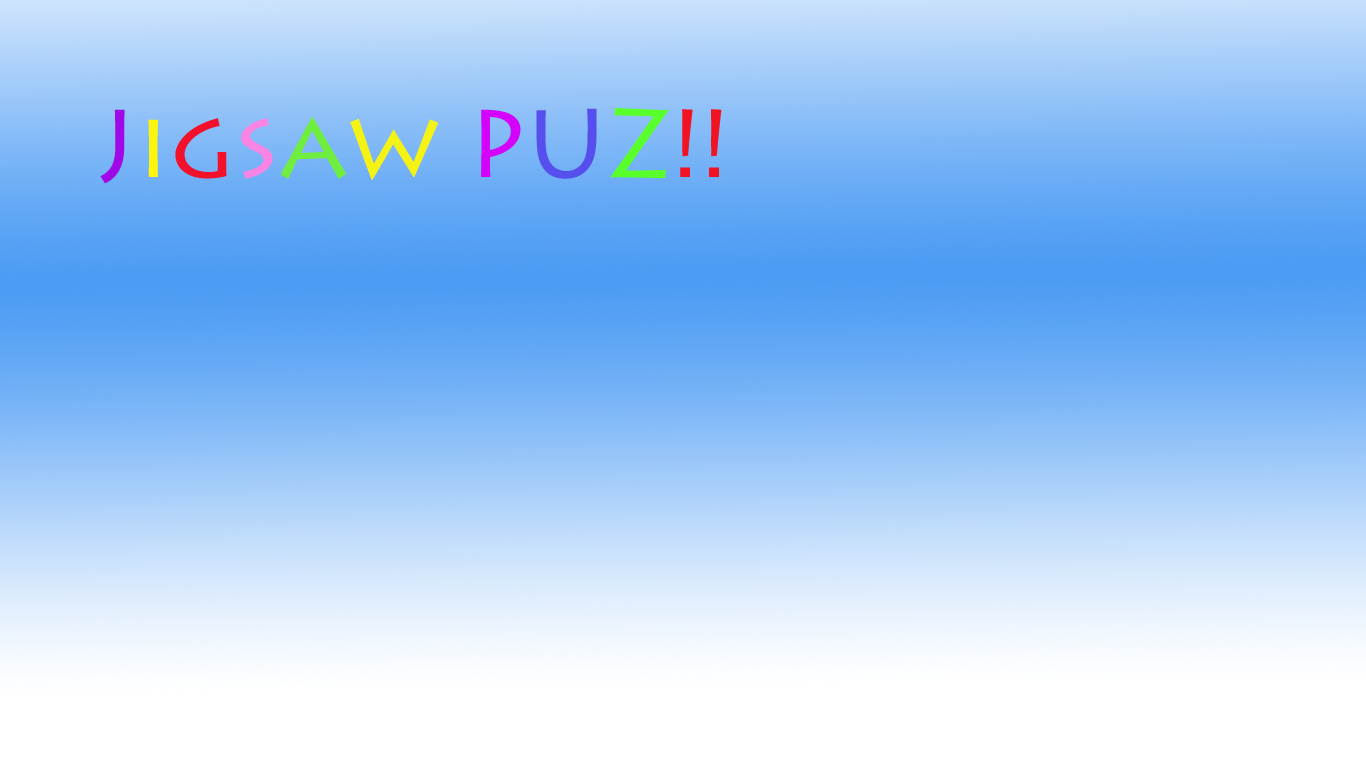
<style>
.page{position:relative;width:1366px;height:768px}
.page>*{position:absolute;margin:0}
.t1{font:96px "LithosPro-Regular";color:#f11222}
.t2{font:96px "LithosPro-Regular";color:#a108e8}
.t3{font:96px "LithosPro-Regular";color:#fef50c}
.t4{font:96px "LithosPro-Regular";color:#f2102b}
.t5{font:96px "LithosPro-Regular";color:#f984e4}
.t6{font:96px "LithosPro-Regular";color:#70ee3f}
.t7{font:96px "LithosPro-Regular";color:#f5f215}
.t8{font:96px "LithosPro-Regular";color:#d502fb}
.t9{font:96px "LithosPro-Regular";color:#564fed}
.t10{font:96px "LithosPro-Regular";color:#58ff2b}
</style>
<div class="page">
<p class="t1" style="left:100px;top:107px;width:622px;height:77px"><span class="t2">J</span><span class="t3">i</span><span class="t4">g</span><span class="t5">s</span><span class="t6">a</span><span class="t7">w </span><span class="t8">P</span><span class="t9">U</span><span class="t10">Z</span>!!</p>
</div>
